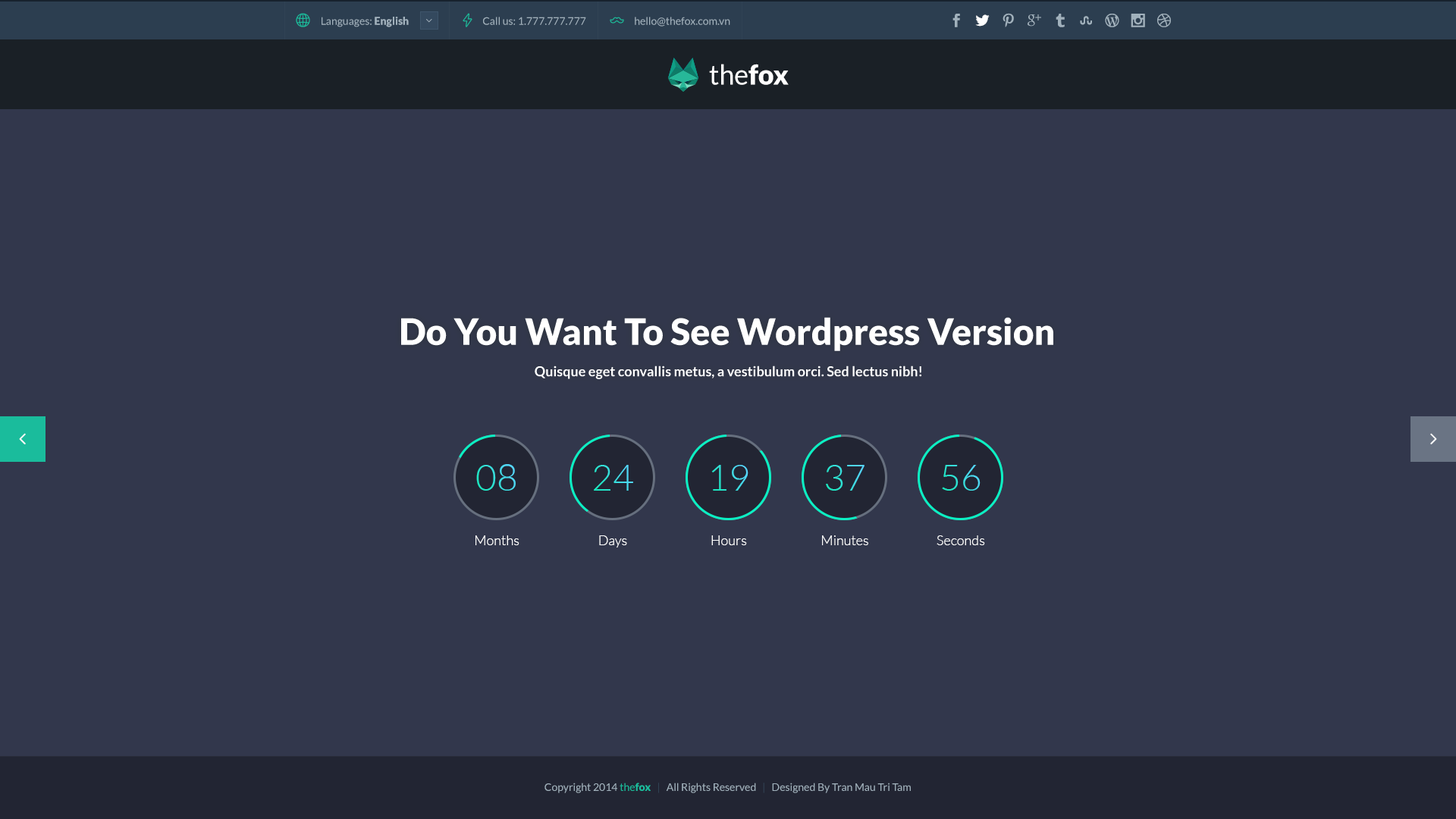
<style>
.page{position:relative;width:1456px;height:819px;background:#32374c}
.page>*{position:absolute;margin:0}
.t1{font:10.6px "Lato-Regular";color:#a1b1bc}
.t2{font:10.6px "Lato-Black";color:#a1b1bc}
.t3{font:27.3px "Lato-Regular";color:#ffffff}
.t4{font:27.3px "Lato-Black";color:#ffffff}
.t5{font:36.4px "Lato-Black";color:#ffffff}
.t6{font:13.6px "Lato-Bold";color:#ffffff}
.t7{font:36.4px "Lato-Light"}
.t8{font:13.6px "Lato-Light";color:#ffffff}
.t9{font:10.6px "Lato-Regular";color:#1abc9c}
.t10{font:10.6px "Lato-Black";color:#1abc9c}
.t11{font:10.6px "Lato-Regular";color:#304253}
</style>
<div class="page">
<p class="t1" style="left:322px;top:17px;width:87px;height:10px">Languages: <span class="t2">English</span></p>
<p class="t1" style="left:483px;top:17px;width:103px;height:8px">Call us: 1.777.777.777</p>
<p class="t1" style="left:635px;top:17px;width:95px;height:10px">hello@thefox.com.vn</p>
<p class="t3" style="left:709px;top:64px;width:80px;height:21px">the<span class="t4">fox</span></p>
<p class="t5" style="left:401px;top:317px;width:652px;height:34px">Do You Want To See Wordpress Version</p>
<p class="t6" style="left:535px;top:366px;width:386px;height:13px">Quisque eget convallis metus, a vestibulum orci. Sed lectus nibh!</p>
<p class="t7" style="left:476px;top:464px;width:40px;height:27px">08</p>
<p class="t7" style="left:594px;top:465px;width:39px;height:26px">24</p>
<p class="t7" style="left:711px;top:465px;width:37px;height:26px">19</p>
<p class="t7" style="left:826px;top:465px;width:38px;height:26px">37</p>
<p class="t7" style="left:942px;top:465px;width:39px;height:26px">56</p>
<p class="t8" style="left:475px;top:535px;width:44px;height:10px">Months</p>
<p class="t8" style="left:599px;top:535px;width:28px;height:13px">Days</p>
<p class="t8" style="left:711px;top:535px;width:36px;height:10px">Hours</p>
<p class="t8" style="left:822px;top:535px;width:46px;height:10px">Minutes</p>
<p class="t8" style="left:937px;top:535px;width:48px;height:10px">Seconds</p>
<p class="t1" style="left:544px;top:783px;width:367px;height:10px">Copyright 2014 <span class="t9">the</span><span class="t10">fox</span><span class="t11">   |   </span>All Rights Reserved<span class="t11">   |   </span>Designed By Tran Mau Tri Tam</p>
</div>
